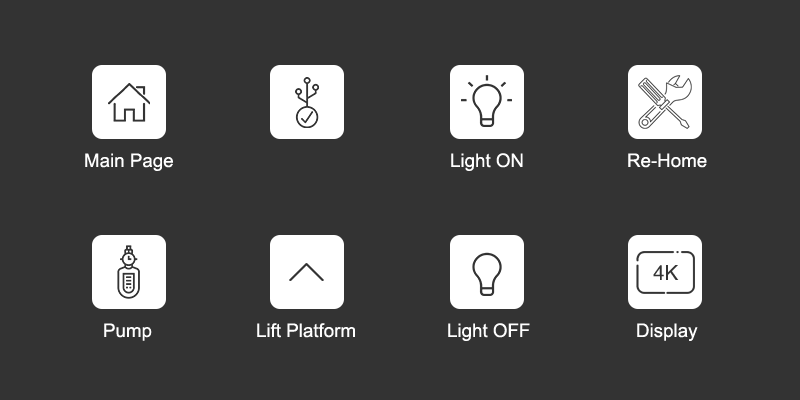
<style>
.page{position:relative;width:800px;height:400px;background:#333333}
.page>*{position:absolute;margin:0}
.t1{font:18.8px "ArialMT";color:#ffffff}
</style>
<div class="page">
<p class="t1" style="left:85px;top:153px;width:88px;height:18px">Main Page</p>
<p class="t1" style="left:451px;top:153px;width:72px;height:18px">Light ON</p>
<p class="t1" style="left:628px;top:153px;width:79px;height:15px">Re-Home</p>
<p class="t1" style="left:104px;top:323px;width:48px;height:18px">Pump</p>
<p class="t1" style="left:257px;top:323px;width:98px;height:15px">Lift Platform</p>
<p class="t1" style="left:448px;top:323px;width:82px;height:18px">Light OFF</p>
<p class="t1" style="left:637px;top:323px;width:61px;height:18px">Display</p>
</div>
